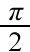
<style>
.page{position:relative;width:30px;height:52px;background:#ffffff}
.page>*{position:absolute;margin:0}
.t1{font:28px "TimesNewRomanPS-ItalicMT";color:#000000}
.t2{font:28px "TimesNewRomanPSMT";color:#000000}
</style>
<div class="page">
<p class="t1" style="left:9px;top:7px;width:15px;height:14px">π</p>
<p class="t2" style="left:9px;top:32px;width:13px;height:19px">2</p>
</div>
